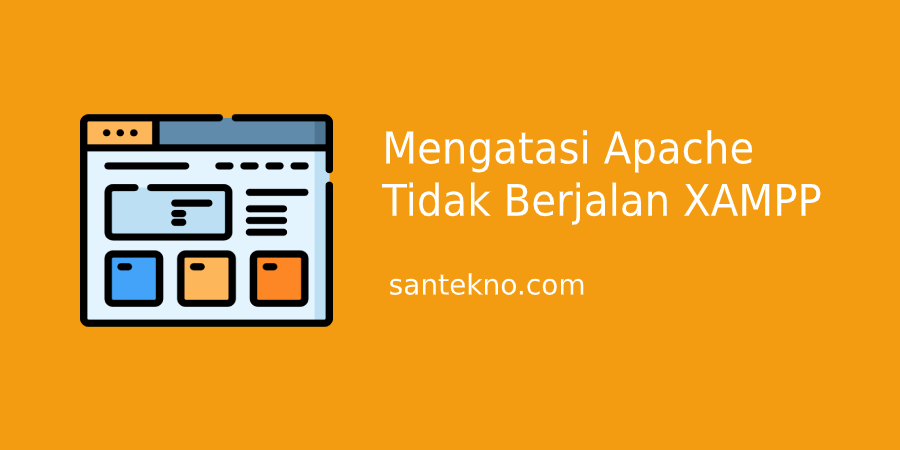
<style>
.page{position:relative;width:900px;height:450px;background:#f39c12}
.page>*{position:absolute;margin:0}
.t1{font:43.6px "Impact";color:#ffffff;scale:0.93 1}
.t2{font:28px "Impact";color:#ffffff}
</style>
<div class="page">
<p class="t1" style="left:382px;top:130px;width:439px;height:95px">Mengatasi Apache<br>Tidak Berjalan XAMPP</p>
<p class="t2" style="left:390px;top:273px;width:194px;height:22px">santekno.com</p>
</div>
